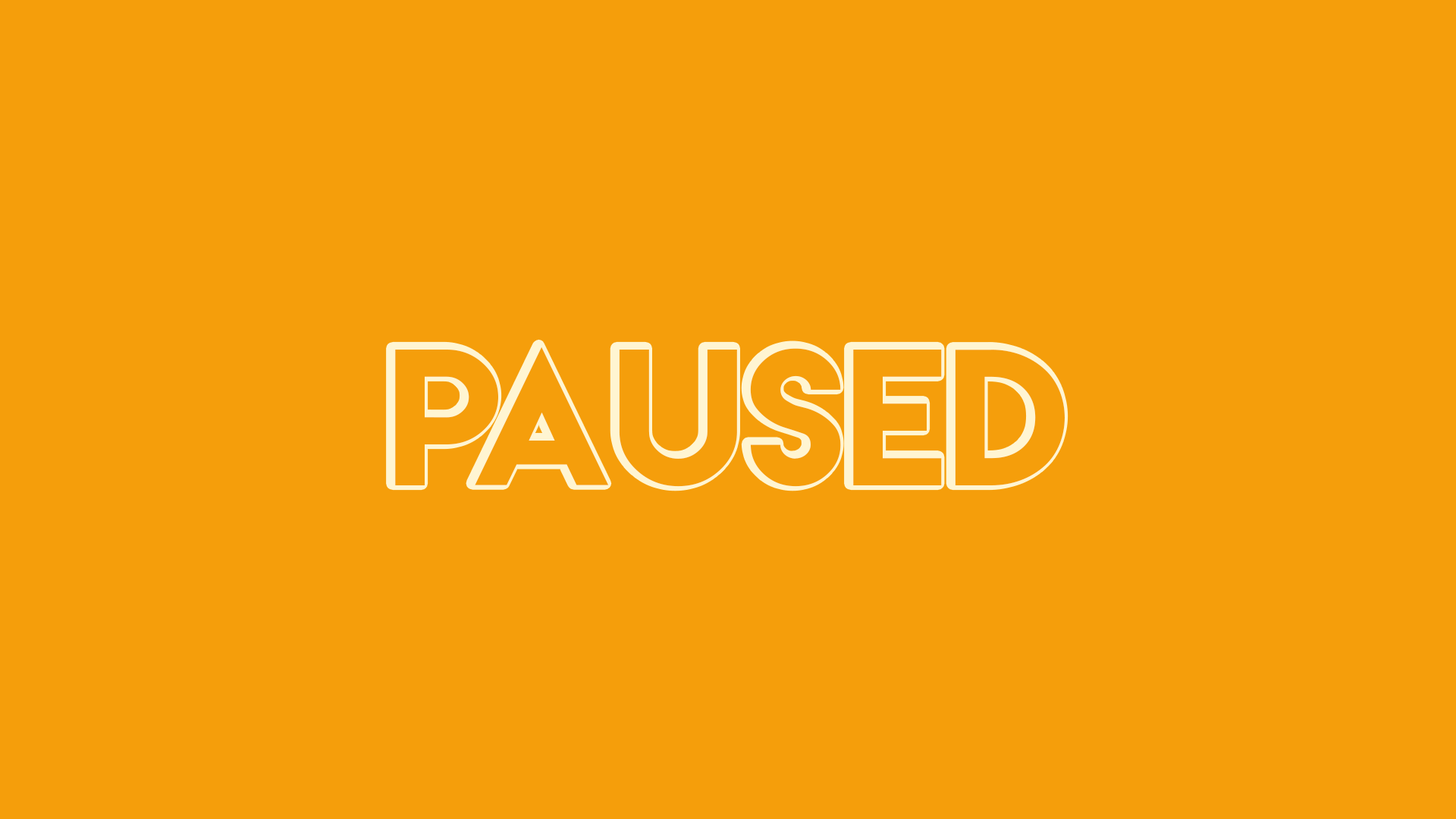
<style>
.page{position:relative;width:1456px;height:819px;background:#f59e0b}
.page>*{position:absolute;margin:0}
.t1{font:172.5px "LemonMilk";color:#f59e0b;scale:1.08 1}
</style>
<div class="page">
<p class="t1" style="left:395px;top:347px;width:670px;height:140px">PAUSED</p>
</div>
